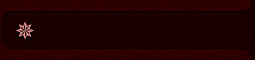
<style>
.page{position:relative;width:255px;height:60px;background:#1b0000}
.page>*{position:absolute;margin:0}
.t1{font:24px "DejaVuSans-Bold";color:#f59a9a}
</style>
<div class="page">
<p class="t1" style="left:16px;top:21px;width:18px;height:19px">✵</p>
</div>
